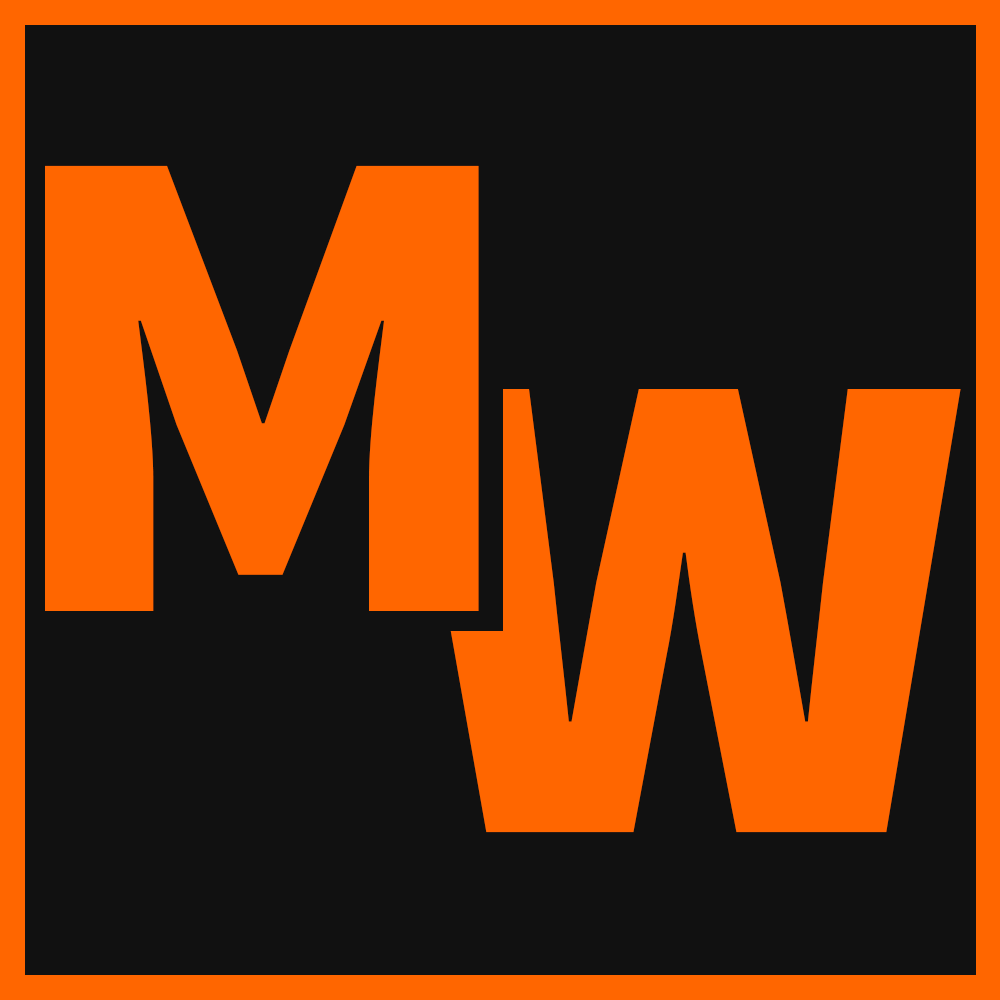
<style>
.page{position:relative;width:1000px;height:1000px;background:#111111}
.page>*{position:absolute;margin:0}
.t1{font:684.2px "SourceSansPro-Black";letter-spacing:-0.045em;color:#ff6600}
.t2{font:681.5px "SourceSansPro-Black";letter-spacing:-0.045em;color:#ff6600}
</style>
<div class="page">
<p class="t1" style="left:45px;top:165px;width:434px;height:446px">M</p>
<p class="t2" style="left:408px;top:389px;width:553px;height:444px">W</p>
</div>
